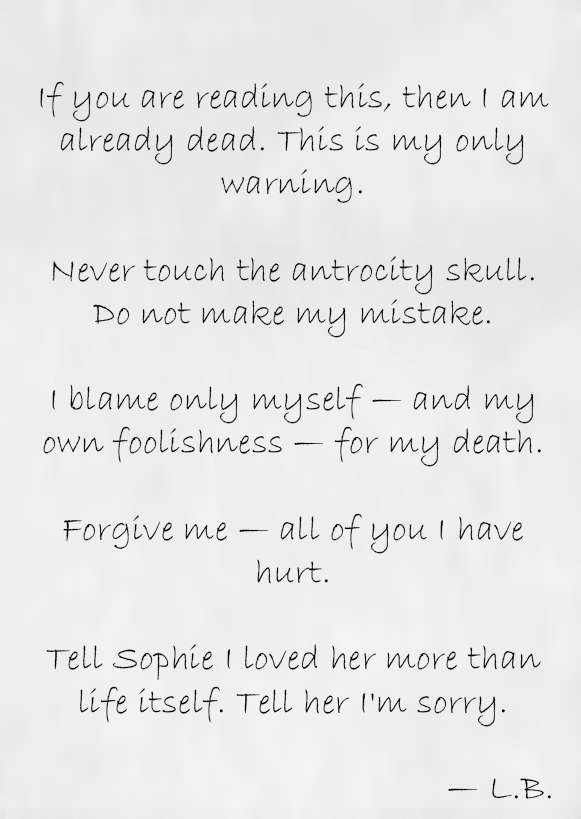
<style>
.page{position:relative;width:581px;height:819px}
.page>*{position:absolute;margin:0}
.t1{font:36px "BradleyHandITC";letter-spacing:0.01em;color:#000000}
</style>
<div class="page">
<p class="t1" style="left:40px;top:81px;width:511px;height:718px;text-align:center">If you are reading this, then I am already dead. This is my only warning.<br><br>Never touch the antrocity skull. Do not make my mistake.<br><br>I blame only myself — and my own foolishness — for my death.<br><br>Forgive me — all of you I have hurt.<br><br>Tell Sophie I loved her more than life itself. Tell her I'm sorry.<br><br>— L.B.</p>
</div>
